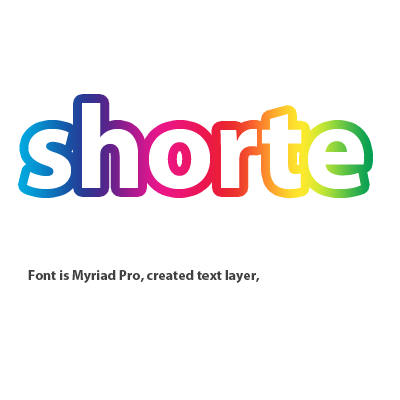
<style>
.page{position:relative;width:400px;height:400px;background:#ffffff}
.page>*{position:absolute;margin:0}
.t1{font:120px "MyriadPro-Bold";color:#ffffff}
.t2{font:14px "MyriadPro-Bold";color:#414141}
</style>
<div class="page">
<p class="t1" style="left:27px;top:103px;width:337px;height:87px">shorte</p>
<p class="t2" style="left:28px;top:270px;width:232px;height:13px">Font is Myriad Pro, created text layer,</p>
</div>
